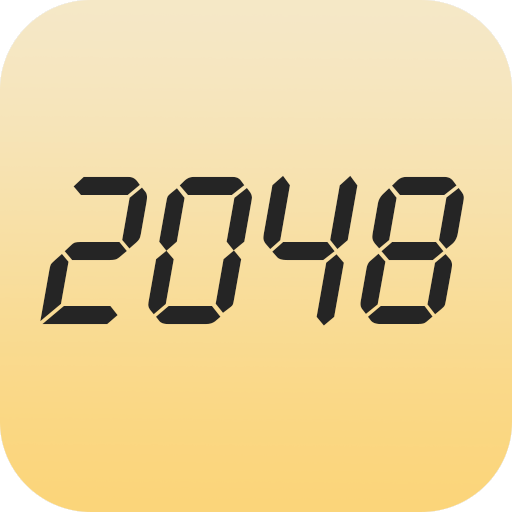
<style>
.page{position:relative;width:512px;height:512px}
.page>*{position:absolute;margin:0}
.t1{font:220px "LcdD";color:#252525}
</style>
<div class="page">
<p class="t1" style="left:40px;top:175px;width:424px;height:151px">2048</p>
</div>
